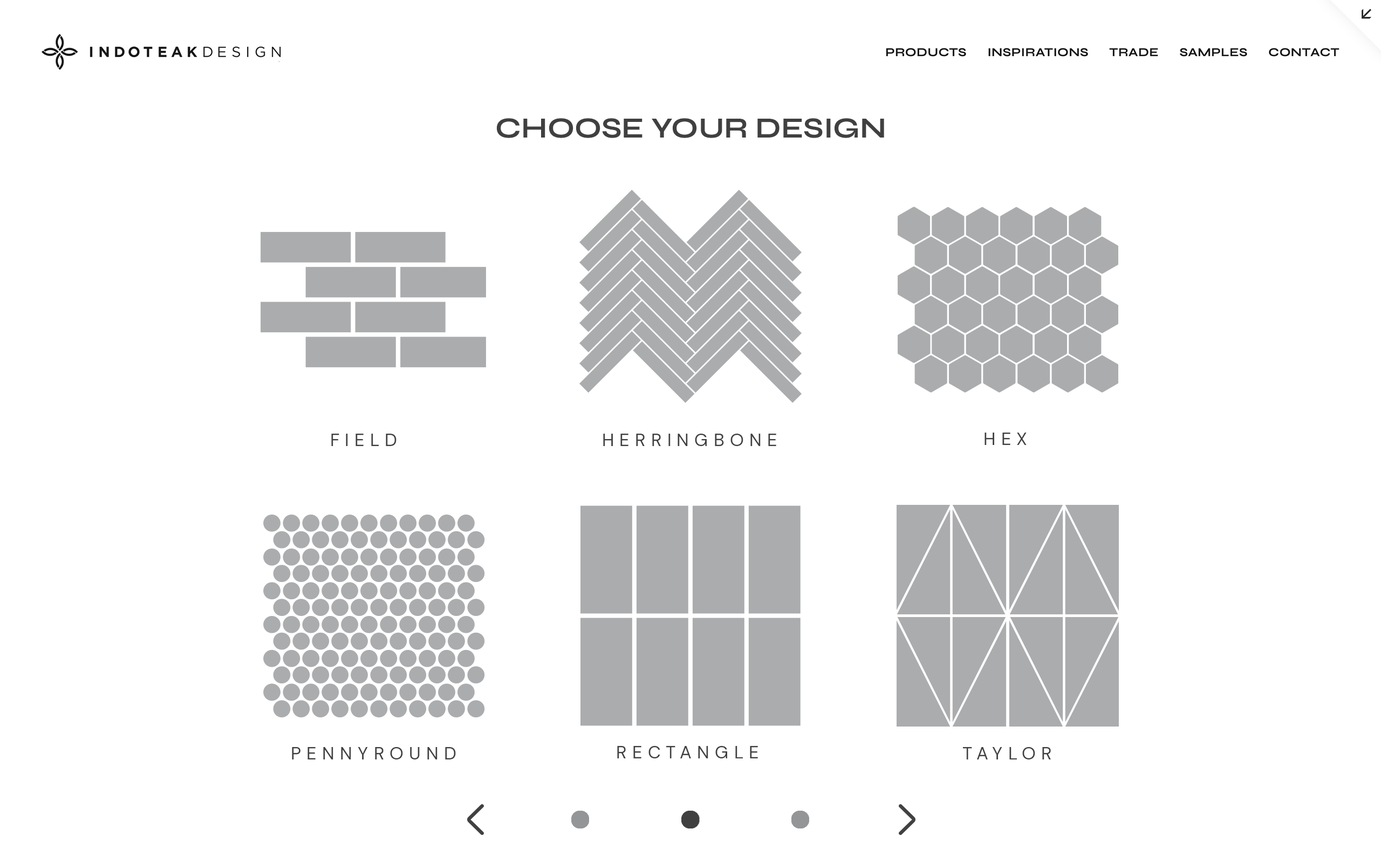
<style>
.page{position:relative;width:1381px;height:863px;background:#ffffff}
.page>*{position:absolute;margin:0}
.t1{font:29.2px "Syne-Bold";color:#404041}
.t2{font:18.2px "DMSans-Regular";letter-spacing:0.3em;color:#404041}
.t3{font:17.9px "DMSans-Regular";letter-spacing:0.3em;color:#404041}
</style>
<div class="page">
<p class="t1" style="left:496px;top:118px;width:388px;height:20px">CHOOSE YOUR DESIGN</p>
<p class="t2" style="left:331px;top:434px;width:66px;height:12px">FIELD</p>
<p class="t2" style="left:603px;top:434px;width:173px;height:12px">HERRINGBONE</p>
<p class="t2" style="left:985px;top:433px;width:42px;height:12px">HEX</p>
<p class="t3" style="left:292px;top:747px;width:164px;height:13px">PENNYROUND</p>
<p class="t3" style="left:617px;top:746px;width:141px;height:13px">RECTANGLE</p>
<p class="t3" style="left:963px;top:747px;width:88px;height:13px">TAYLOR</p>
</div>
